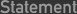
<style>
.page{position:relative;width:77px;height:14px;background:#333333}
.page>*{position:absolute;margin:0}
.t1{font:18px "DIN-1451-Mittelschrift-DB-Regular";color:#9a9a9a}
</style>
<div class="page">
<p class="t1" style="left:0px;top:0px;width:77px;height:14px">Statement</p>
</div>
